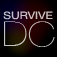
<style>
.page{position:relative;width:57px;height:57px}
.page>*{position:absolute;margin:0}
.t1{font:10.2px "HelveticaNeue";color:#c8bfc3;scale:1.18 1}
.t2{font:34px "HelveticaNeue-UltraLight";color:#c0c0bf;scale:1.18 1}
</style>
<div class="page">
<p class="t1" style="left:3px;top:11px;width:50px;height:9px">SURVIVE</p>
<p class="t2" style="left:4px;top:21px;width:51px;height:26px">DC</p>
</div>
